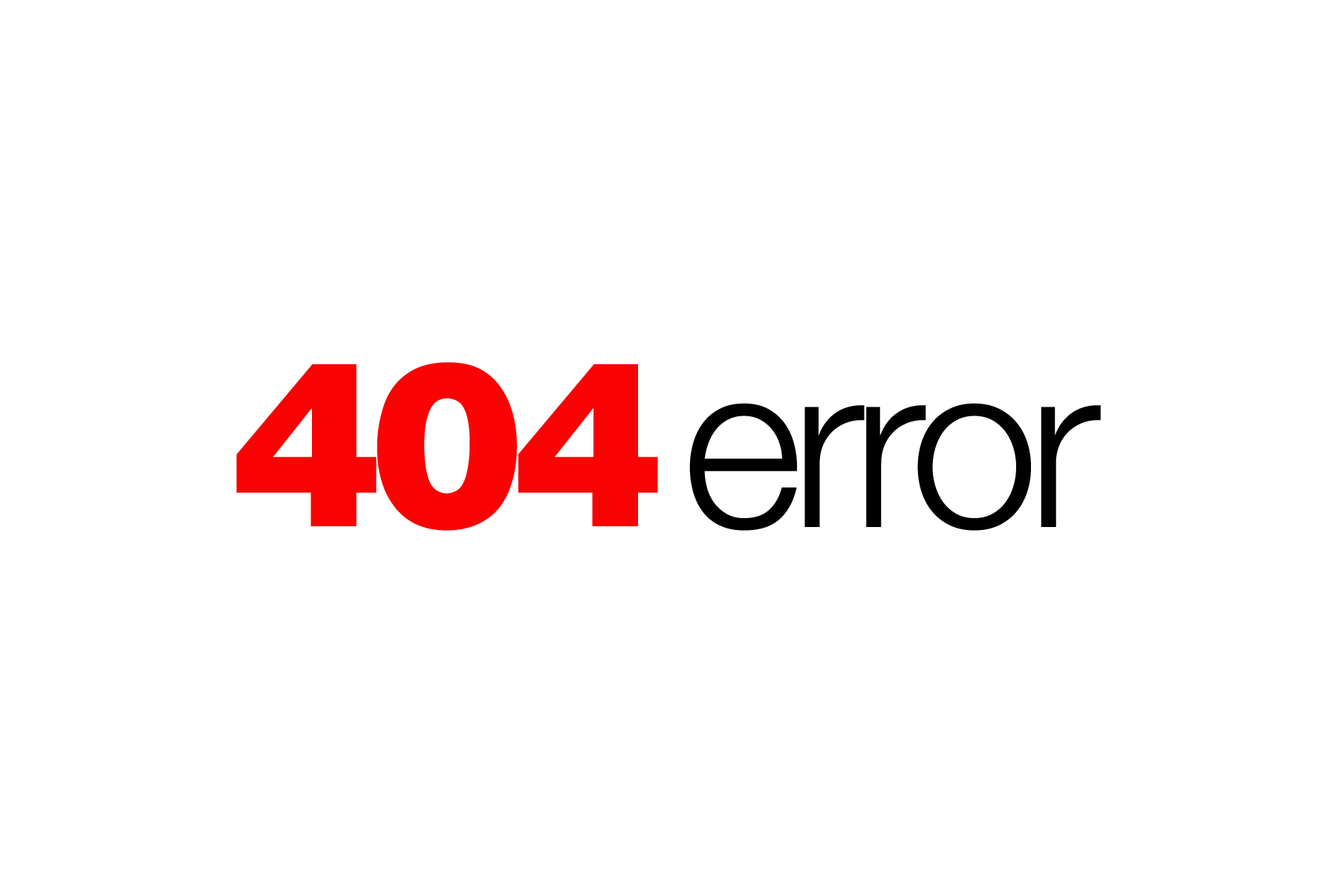
<style>
.page{position:relative;width:1337px;height:892px;background:#ffffff}
.page>*{position:absolute;margin:0}
.t1{font:232.2px "Helvetica-Black";letter-spacing:-0.06em;color:#f90202}
.t2{font:232.2px "HelveticaNeue-Light";letter-spacing:-0.05em;color:#010101}
</style>
<div class="page">
<p class="t1" style="left:236px;top:362px;width:422px;height:169px">404</p>
<p class="t2" style="left:690px;top:403px;width:411px;height:128px">error</p>
</div>
